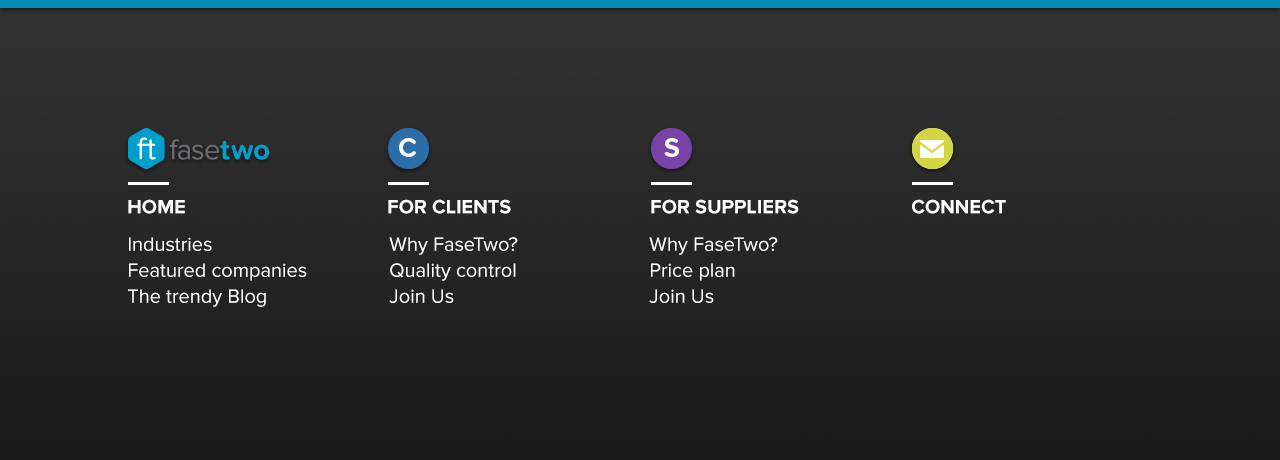
<style>
.page{position:relative;width:1280px;height:460px}
.page>*{position:absolute;margin:0}
.t1{font:20px "ProximaNova-Bold";color:#ffffff;text-transform:uppercase}
.t2{font:20px/26px "ProximaNova-Regular";color:#ffffff}
</style>
<div class="page">
<p class="t1" style="left:128px;top:199px;width:57px;height:15px">home</p>
<p class="t1" style="left:388px;top:199px;width:123px;height:15px">For clients</p>
<p class="t1" style="left:651px;top:199px;width:148px;height:15px">for suppliers</p>
<p class="t1" style="left:912px;top:199px;width:94px;height:15px">connect</p>
<p class="t2" style="left:128px;top:237px;width:179px;height:70px">Industries<br>Featured companies<br>The trendy Blog</p>
<p class="t2" style="left:389px;top:237px;width:129px;height:66px">Why FaseTwo?<br>Quality control<br>Join Us</p>
<p class="t2" style="left:649px;top:237px;width:129px;height:66px">Why FaseTwo?<br>Price plan<br>Join Us</p>
</div>
